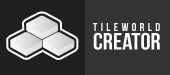
<style>
.page{position:relative;width:170px;height:75px;background:#333333}
.page>*{position:absolute;margin:0}
.t1{font:11.3px "BebasNeue";letter-spacing:0.27em;color:#ffffff;scale:1.07 1}
.t2{font:23.5px/18.4px "BebasNeue";color:#ffffff;scale:1.07 1}
</style>
<div class="page">
<p class="t1" style="left:93px;top:23px;width:67px;height:27px">TILEWORLD<br><span class="t2">CreatOr</span></p>
</div>
